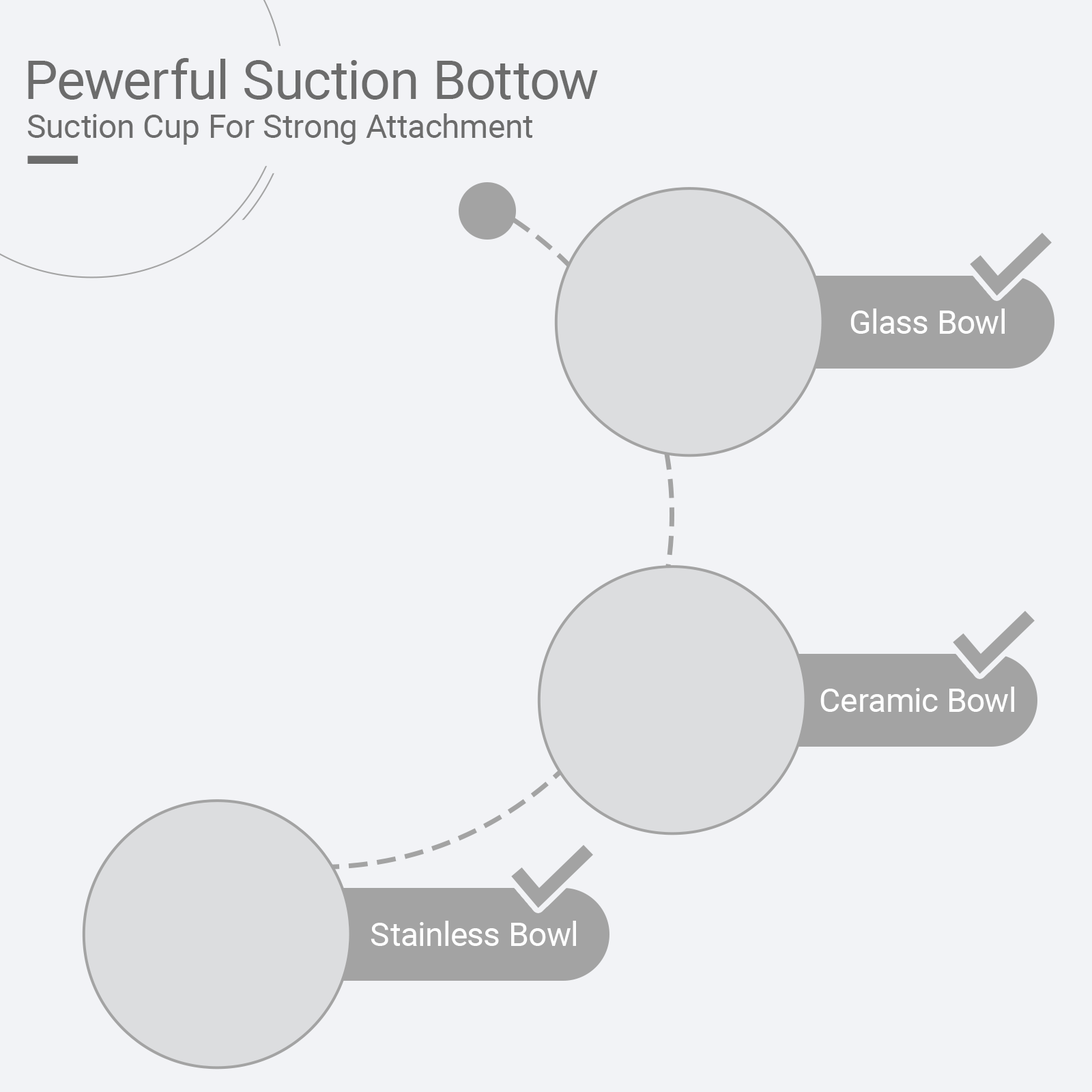
<style>
.page{position:relative;width:1092px;height:1092px;background:#f2f3f6}
.page>*{position:absolute;margin:0}
.t1{font:53.6px "Roboto-Regular";color:#6c6c6c}
.t2{font:32.8px "Roboto-Regular";color:#6c6c6c}
.t3{font:32.8px "Roboto-Regular";color:#ffffff}
</style>
<div class="page">
<p class="t1" style="left:28px;top:58px;width:570px;height:42px">Pewerful Suction Bottow</p>
<p class="t2" style="left:27px;top:113px;width:505px;height:32px">Suction Cup For Strong Attachment</p>
<p class="t3" style="left:850px;top:308px;width:155px;height:26px">Glass Bowl</p>
<p class="t3" style="left:820px;top:687px;width:194px;height:25px">Ceramic Bowl</p>
<p class="t3" style="left:371px;top:921px;width:205px;height:25px">Stainless Bowl</p>
</div>
